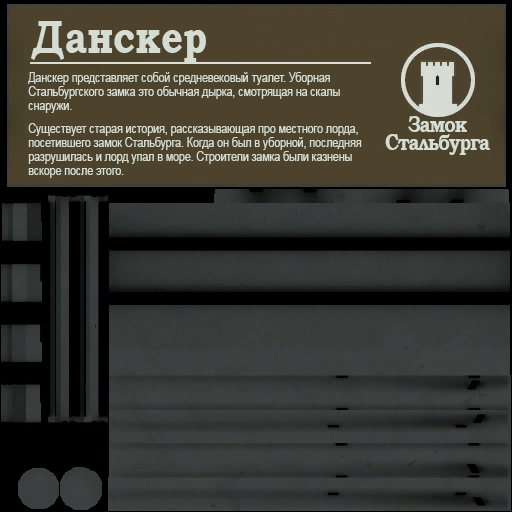
<style>
.page{position:relative;width:512px;height:512px;background:#4d432d}
.page>*{position:absolute;margin:0}
.t1{font:47px "BookmanOldStyle-Bold";color:#d5ddd3;scale:0.81 1}
.t2{font:13px/14px "ArialMT";color:#d5ddd3;scale:0.81 1}
.t3{font:13px/23px "ArialMT";color:#d5ddd3;scale:0.81 1}
.t4{font:23px/18px "BookmanOldStyle-Bold";letter-spacing:-0.06em;color:#d5ddd3;scale:0.81 1}
</style>
<div class="page">
<p class="t1" style="left:31px;top:21px;width:175px;height:42px">Данскер</p>
<p class="t2" style="left:28px;top:72px;width:334px;height:106px">Данскер представляет собой средневековый туалет. Уборная Стальбургского замка это обычная дырка, смотрящая на скалы снаружи.<br><span class="t3">Существует старая история, рассказывающая про местного лорда,</span> посетившего замок Стальбурга. Когда он был в уборной, последняя разрушилась и лорд упал в море. Строители замка были казнены вскоре после этого.</p>
<p class="t4" style="left:385px;top:116px;width:105px;height:39px;text-align:center">Замок<br>Стальбурга</p>
</div>
